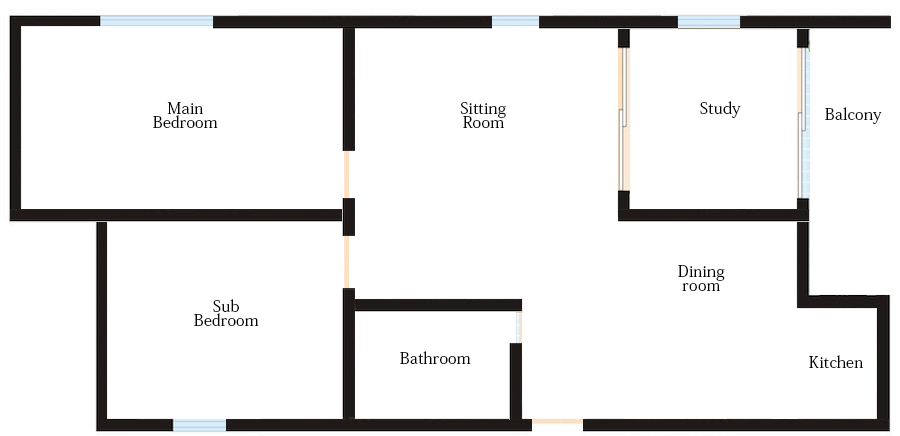
<style>
.page{position:relative;width:900px;height:436px;background:#ffffff}
.page>*{position:absolute;margin:0}
.t1{font:16px/14px "AdobeKaitiStd-Regular";color:#000000}
.t2{font:16px "AdobeKaitiStd-Regular";color:#000000}
</style>
<div class="page">
<p class="t1" style="left:153px;top:102px;width:65px;height:26px;text-align:center">Main <br>Bedroom</p>
<p class="t1" style="left:460px;top:102px;width:46px;height:26px;text-align:center">Sitting<br>Room</p>
<p class="t2" style="left:700px;top:101px;width:41px;height:17px">Study</p>
<p class="t2" style="left:825px;top:107px;width:57px;height:17px">Balcony</p>
<p class="t1" style="left:678px;top:265px;width:47px;height:26px;text-align:center">Dining<br>room</p>
<p class="t1" style="left:194px;top:299px;width:65px;height:27px;text-align:center">Sub <br>Bedroom</p>
<p class="t2" style="left:400px;top:351px;width:71px;height:13px">Bathroom</p>
<p class="t2" style="left:809px;top:355px;width:54px;height:13px">Kitchen</p>
</div>
